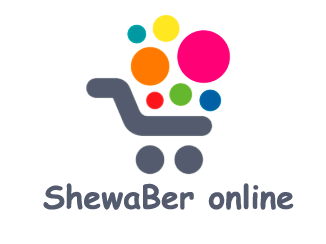
<style>
.page{position:relative;width:326px;height:244px;background:#ffffff}
.page>*{position:absolute;margin:0}
.t1{font:32px "ComicSansMS-Bold";color:#545b6e}
</style>
<div class="page">
<p class="t1" style="left:43px;top:183px;width:251px;height:27px">ShewaBer online</p>
</div>
